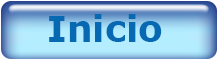
<style>
.page{position:relative;width:218px;height:60px}
.page>*{position:absolute;margin:0}
.t1{font:36px "Verdana-Bold";color:#0669b2}
</style>
<div class="page">
<p class="t1" style="left:49px;top:14px;width:113px;height:28px">Inicio</p>
</div>
